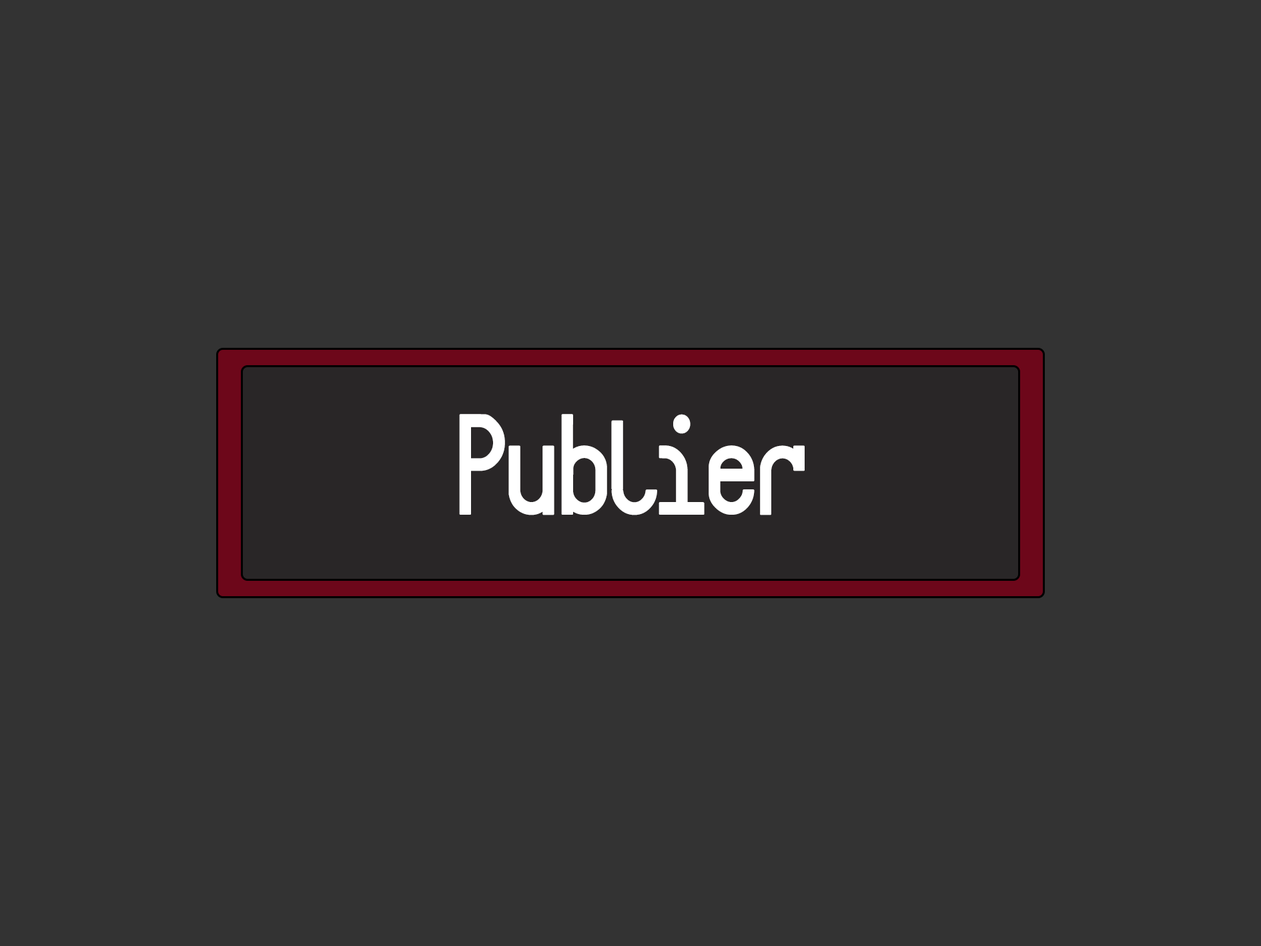
<style>
.page{position:relative;width:1261px;height:946px;background:#333333}
.page>*{position:absolute;margin:0}
.t1{font:125.2px "Targa";color:#ffffff;scale:0.9 1}
</style>
<div class="page">
<p class="t1" style="left:459px;top:414px;width:346px;height:101px">Publier</p>
</div>
